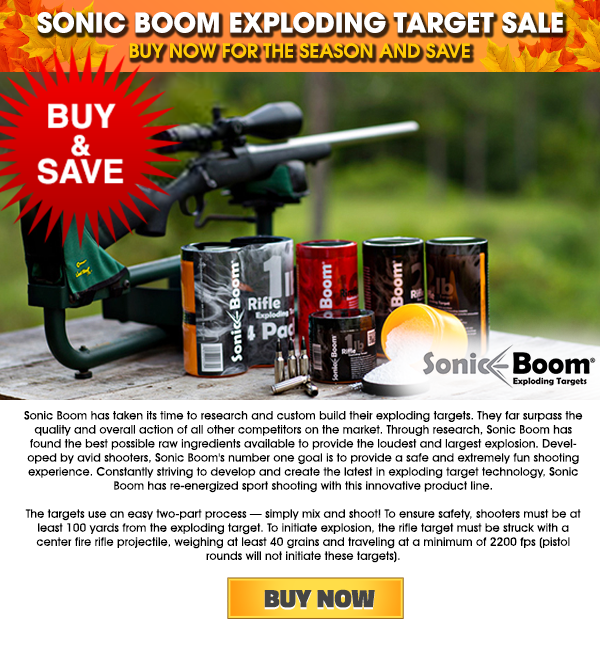
<style>
.page{position:relative;width:600px;height:645px;background:#ffffff}
.page>*{position:absolute;margin:0}
.t1{font:27px "ITCAvantGardePro-Bold";color:#ffffff}
.t2{font:19.1px "AvantGardeLT-Demi";color:#ffca05}
.t3{font:11.7px "AvantGardeITCbyBT-Medium";letter-spacing:0.005em;color:#000000}
.t4{font:25.3px "Titillium-Black";letter-spacing:0.005em;color:#454545}
</style>
<div class="page">
<p class="t1" style="left:37px;top:12px;width:526px;height:21px">SONIC BOOM EXPLODING TARGET SALE</p>
<p class="t2" style="left:129px;top:43px;width:341px;height:15px">BUY NOW FOR THE SEASON AND SAVE</p>
<p class="t3" style="left:24px;top:411px;width:559px;height:152px;text-align:center">Sonic Boom has taken its time to research and custom build their exploding targets. They far surpass the quality and overall action of all other competitors on the market. Through research, Sonic Boom has found the best possible raw ingredients available to provide the loudest and largest explosion. Developed by avid shooters, Sonic Boom's number one goal is to provide a safe and extremely fun shooting experience. Constantly striving to develop and create the latest in exploding target technology, Sonic Boom has re-energized sport shooting with this innovative product line.<br><br>The targets use an easy two-part process — simply mix and shoot! To ensure safety, shooters must be at least 100 yards from the exploding target. To initiate explosion, the rifle target must be struck with a center fire rifle projectile, weighing at least 40 grains and traveling at a minimum of 2200 fps (pistol rounds will not initiate these targets).</p>
<p class="t4" style="left:264px;top:591px;width:111px;height:19px">BUY NOW</p>
<p class="t4" style="left:264px;top:589px;width:111px;height:19px">BUY NOW</p>
</div>
